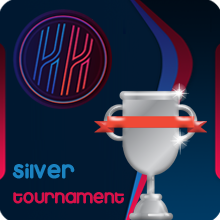
<style>
.page{position:relative;width:220px;height:220px}
.page>*{position:absolute;margin:0}
.t1{font:25.3px/22.3px "Marshmallow-SuperPuff";letter-spacing:-0.03em;color:#d71149}
.t2{font:32px/22.3px "Marshmallow-SuperPuff";color:#1b83c1}
</style>
<div class="page">
<p class="t1" style="left:12px;top:163px;width:112px;height:41px"><span class="t2">silver<br></span>tournament</p>
</div>
